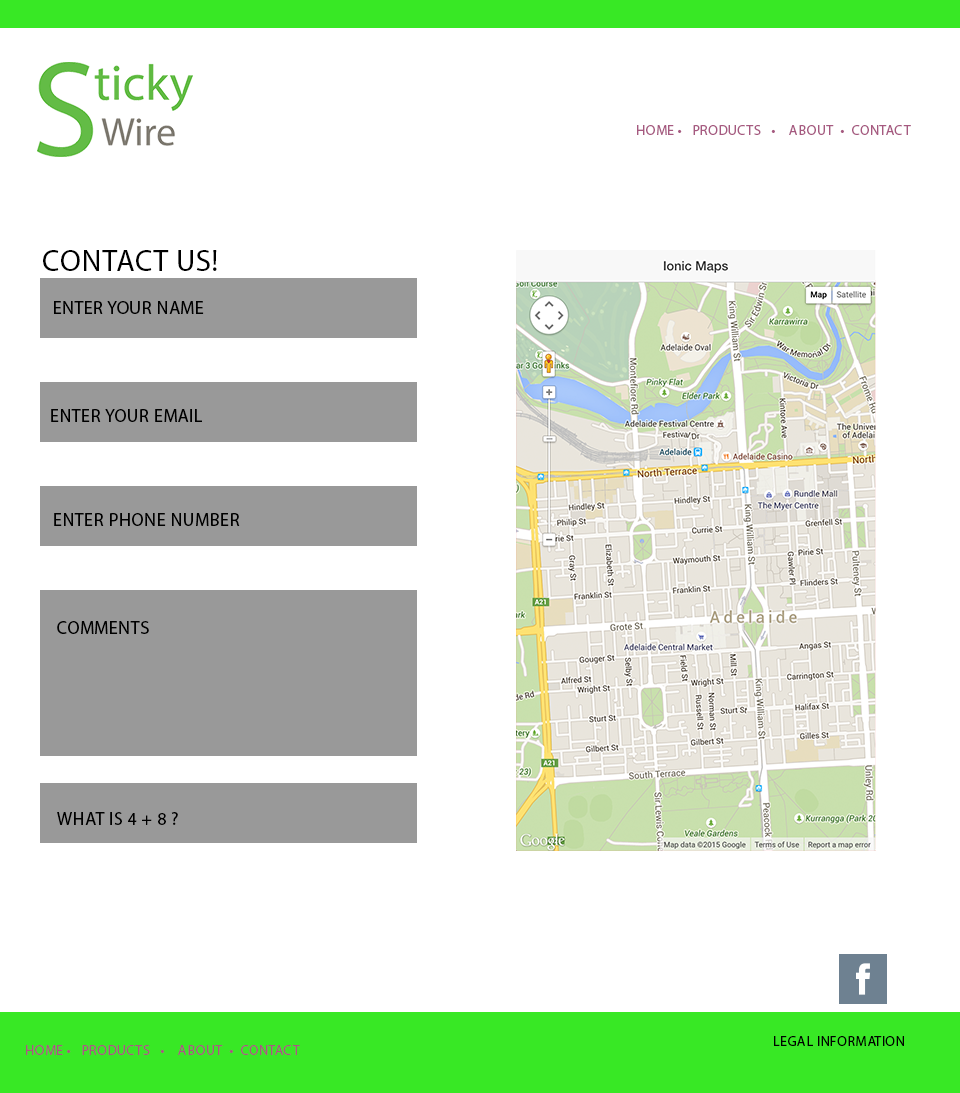
<style>
.page{position:relative;width:960px;height:1093px;background:#ffffff}
.page>*{position:absolute;margin:0}
.t1{font:14px "MyriadPro-Regular";letter-spacing:0.025em;color:#a65980;text-transform:uppercase}
.t2{font:30px "MyriadPro-Regular";letter-spacing:0.025em;color:#000000;text-transform:uppercase}
.t3{font:18px "MyriadPro-Regular";letter-spacing:0.025em;color:#000000;text-transform:uppercase}
.t4{font:14px "MyriadPro-Regular";letter-spacing:0.025em;color:#010101;text-transform:uppercase}
</style>
<div class="page">
<p class="t1" style="left:637px;top:125px;width:274px;height:10px">home •   Products   •    ABOUT  •  contact</p>
<p class="t2" style="left:43px;top:250px;width:174px;height:21px">Contact us!</p>
<p class="t3" style="left:54px;top:301px;width:150px;height:13px">Enter your name</p>
<p class="t3" style="left:51px;top:409px;width:151px;height:13px">Enter your email</p>
<p class="t3" style="left:54px;top:513px;width:186px;height:13px">Enter phone number</p>
<p class="t3" style="left:57px;top:621px;width:92px;height:13px">Comments</p>
<p class="t3" style="left:57px;top:812px;width:121px;height:13px">What is 4 + 8 ?</p>
<p class="t4" style="left:774px;top:1036px;width:130px;height:10px">Legal Information</p>
<p class="t1" style="left:26px;top:1045px;width:274px;height:10px">home •   Products   •    ABOUT  •  contact</p>
</div>
